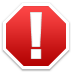
<style>
.page{position:relative;width:72px;height:72px;background:#ffffff}
.page>*{position:absolute;margin:0}
.t1{font:59.9px "Impact";color:#ffffff;scale:0.93 1}
</style>
<div class="page">
<p class="t1" style="left:30px;top:12px;width:12px;height:47px">!</p>
</div>
